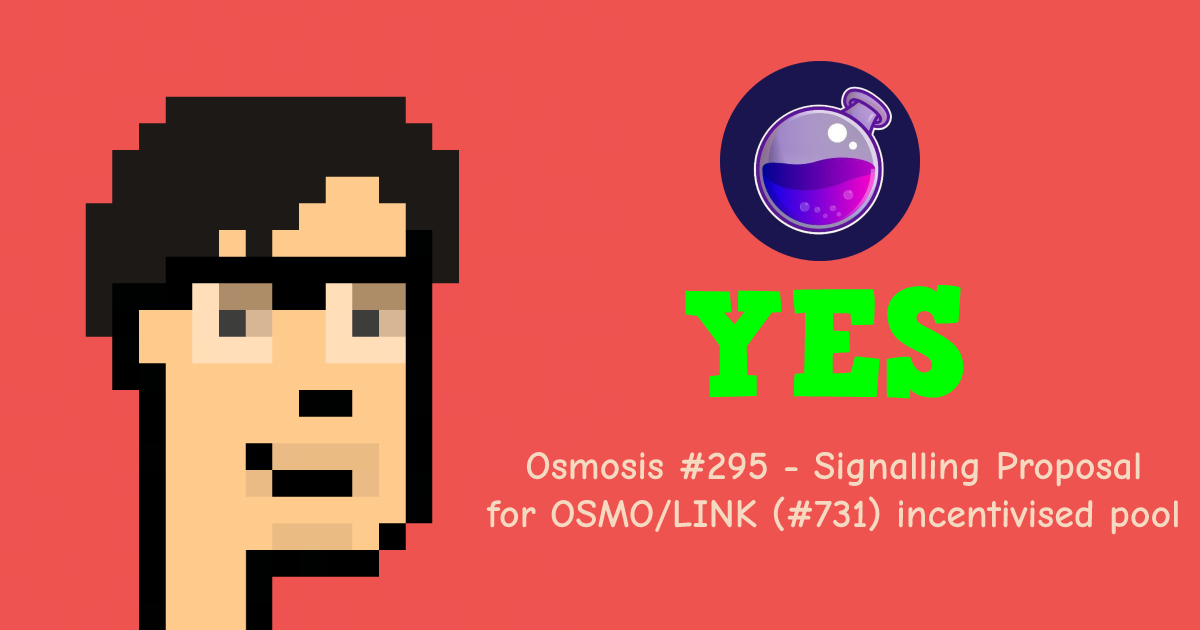
<style>
.page{position:relative;width:1200px;height:630px;background:#ef5350}
.page>*{position:absolute;margin:0}
.t1{font:150px "HVDComicSerifPro";color:#00ff00}
.t2{font:40px "ComicNeue-Bold";color:#f5d9c0}
</style>
<div class="page">
<p class="t1" style="left:685px;top:284px;width:279px;height:115px">YES</p>
<p class="t2" style="left:486px;top:451px;width:692px;height:84px;text-align:center">Osmosis #295 - Signalling Proposal<br>for OSMO/LINK (#731) incentivised pool</p>
</div>
